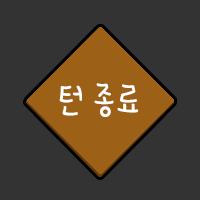
<style>
.page{position:relative;width:200px;height:200px;background:#333333}
.page>*{position:absolute;margin:0}
.t1{font:39.4px "365uppercat";color:#ffffff}
</style>
<div class="page">
<p class="t1" style="left:59px;top:83px;width:79px;height:34px">턴 종료</p>
</div>
